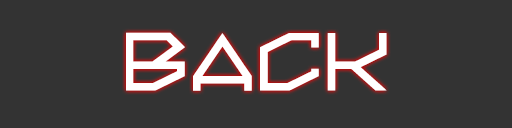
<style>
.page{position:relative;width:512px;height:128px;background:#333333}
.page>*{position:absolute;margin:0}
.t1{font:82px "KinineAlpha";color:#ffffff}
</style>
<div class="page">
<p class="t1" style="left:126px;top:32px;width:261px;height:59px">Back</p>
</div>
